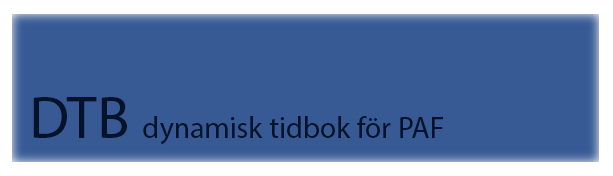
<style>
.page{position:relative;width:613px;height:176px;background:#375a94}
.page>*{position:absolute;margin:0}
.t1{font:30px "MyriadPro-Regular";color:#04132b}
.t2{font:60px "MyriadPro-Regular";color:#04132b}
</style>
<div class="page">
<p class="t1" style="left:33px;top:97px;width:410px;height:48px"><span class="t2">DTB </span>dynamisk tidbok för PAF</p>
</div>
